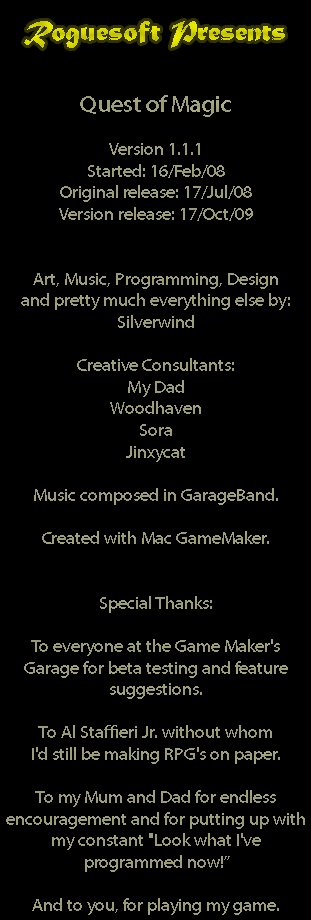
<style>
.page{position:relative;width:311px;height:920px;background:#000000}
.page>*{position:absolute;margin:0}
.t1{font:18px "MyriadPro-Regular";color:#9d9d76}
.t2{font:30px "MyriadPro-Regular";color:#9d9d76}
.t3{font:24px "MyriadPro-Regular";color:#9d9d76}
</style>
<div class="page">
<p class="t1" style="left:6px;top:95px;width:299px;height:820px;text-align:center"><span class="t2"><br><br><br></span><span class="t3">Quest of Magic</span><br><br>Version 1.1.1<br>Started: 16/Feb/08<br>Original release: 17/Jul/08<br>Version release: 17/Oct/09<br><br><br>Art, Music, Programming, Design<br>and pretty much everything else by:<br>Silverwind<br><br>Creative Consultants:<br>My Dad<br>Woodhaven<br>Sora<br>Jinxycat<br><br>Music composed in GarageBand.<br><br>Created with Mac GameMaker.<br><br><br>Special Thanks:<br><br>To everyone at the Game Maker's<br>Garage for beta testing and feature<br>suggestions.<br><br>To Al Staffieri Jr. without whom<br>I'd still be making RPG's on paper.<br><br>To my Mum and Dad for endless<br>encouragement and for putting up with<br>my constant "Look what I've<br>programmed now!”<br><br>And to you, for playing my game.</p>
</div>
